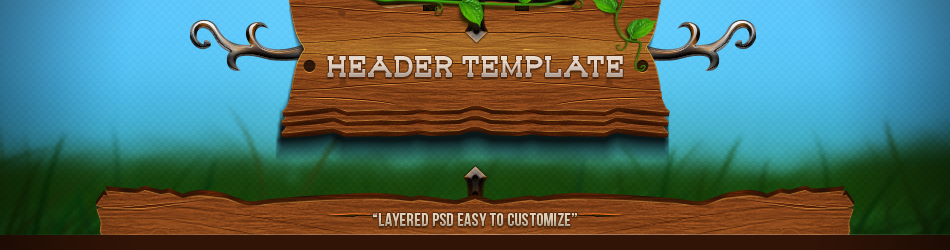
<style>
.page{position:relative;width:950px;height:250px}
.page>*{position:absolute;margin:0}
.t1{font:30px "BouWestern"}
.t2{font:18px "BebasNeue";letter-spacing:0.02em;color:#d5cab3}
</style>
<div class="page">
<p class="t1" style="left:327px;top:56px;width:296px;height:21px">HEADER TEMPLATE</p>
<p class="t2" style="left:372px;top:213px;width:205px;height:13px">“Layered PSD easy to customize”</p>
</div>
